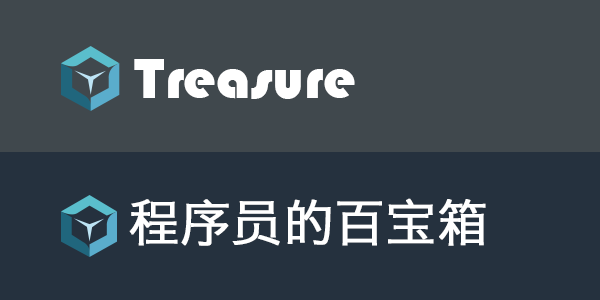
<style>
.page{position:relative;width:600px;height:300px;background:#40484d}
.page>*{position:absolute;margin:0}
.t1{font:58.7px "Bauhaus93";color:#ffffff}
.t2{font:50px "HiraginoSansGB-W3";color:#ffffff;font-weight:bold}
</style>
<div class="page">
<p class="t1" style="left:134px;top:59px;width:221px;height:40px">Treasure</p>
<p class="t2" style="left:129px;top:198px;width:357px;height:48px">程序员的百宝箱</p>
</div>
